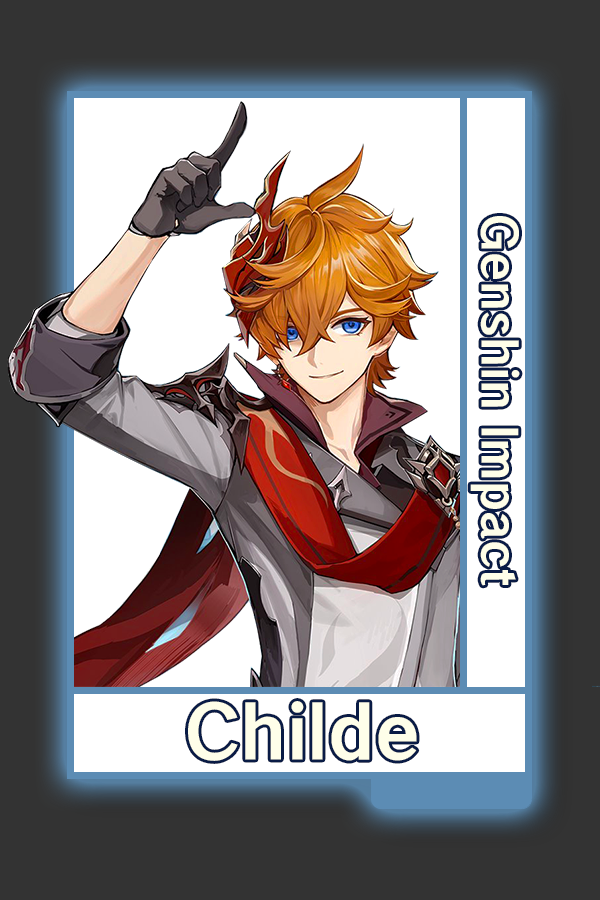
<style>
.page{position:relative;width:600px;height:900px;background:#ffffff}
.page>*{position:absolute;margin:0}
.t1{font:48.8px "HYWenHei-HEW";color:#fefef4}
.t2{font:75px "HYWenHei-HEW";color:#fefef4}
</style>
<div class="page">
<p class="t1" style="left:470px;top:216px;width:50px;height:370px;rotate:90deg">Genshin Impact</p>
<p class="t2" style="left:188px;top:701px;width:229px;height:60px">Childe</p>
</div>
